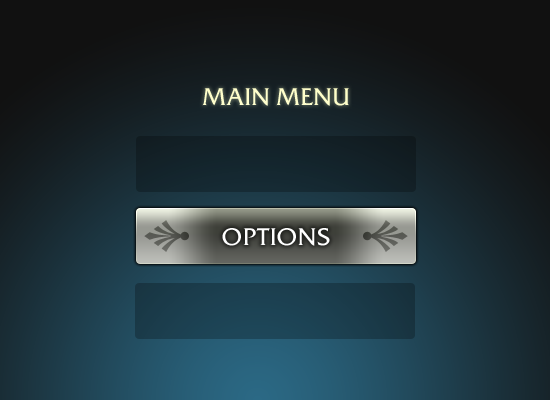
<style>
.page{position:relative;width:550px;height:400px}
.page>*{position:absolute;margin:0}
.t1{font:24px "FrizQua-Regu";color:#ffffcc;text-transform:uppercase}
.t2{font:24px "FrizQua-Regu";color:#ffffff;text-transform:uppercase}
</style>
<div class="page">
<p class="t1" style="left:202px;top:88px;width:147px;height:18px">Main Menu</p>
<p class="t2" style="left:222px;top:228px;width:108px;height:18px">Options</p>
</div>
